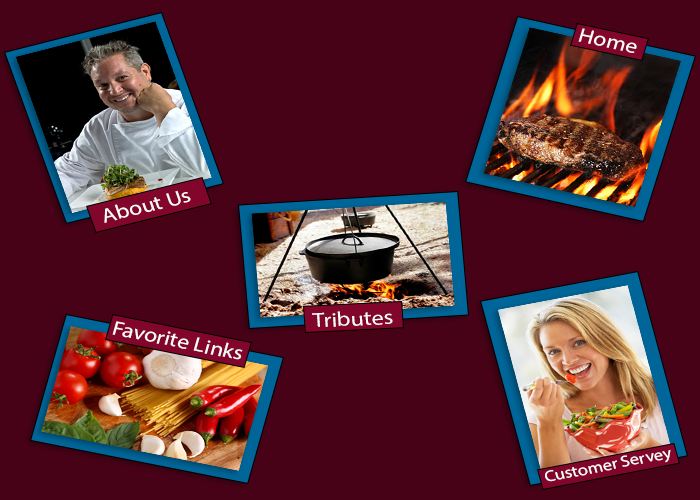
<style>
.page{position:relative;width:700px;height:500px;background:#480217}
.page>*{position:absolute;margin:0}
.t1{font:20px "MyriadPro-Regular";color:#fcfbfb;scale:1.17 1}
.t2{font:20.2px "MyriadPro-Regular";color:#fcfbfb;scale:1.16 1}
.t3{font:20.3px "MyriadPro-Regular";color:#fcfbfb;scale:1.19 1}
.t4{font:15.6px "MyriadPro-Regular";color:#fcfbfb;scale:1.17 1}
</style>
<div class="page">
<p class="t1" style="left:578px;top:28px;width:59px;height:25px;rotate:12deg">Home</p>
<p class="t2" style="left:104px;top:190px;width:87px;height:33px;rotate:-14deg">About Us</p>
<p class="t3" style="left:312px;top:311px;width:81px;height:16px;rotate:-3deg">Tributes</p>
<p class="t1" style="left:112px;top:321px;width:131px;height:39px;rotate:11deg">Favorite Links</p>
<p class="t4" style="left:545px;top:450px;width:126px;height:32px;rotate:-11deg">Customer Servey</p>
</div>
